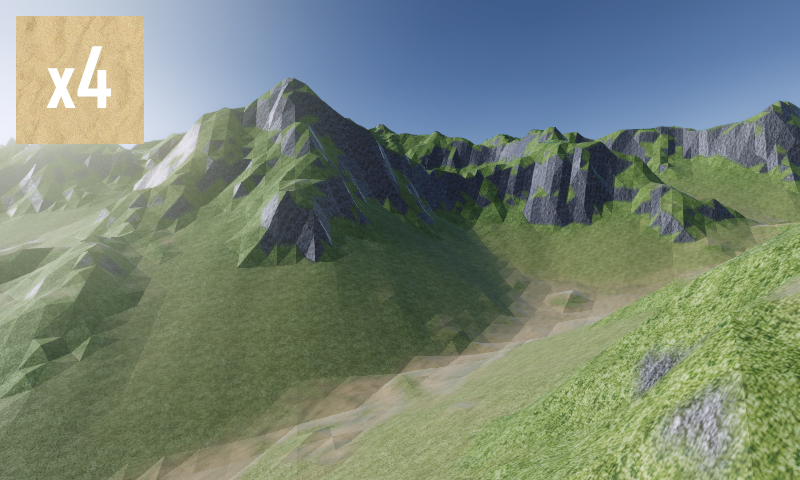
<style>
.page{position:relative;width:800px;height:480px}
.page>*{position:absolute;margin:0}
.t1{font:80.4px "AgencyFB-Bold";color:#ffffff}
</style>
<div class="page">
<p class="t1" style="left:46px;top:46px;width:65px;height:62px">x4</p>
</div>
